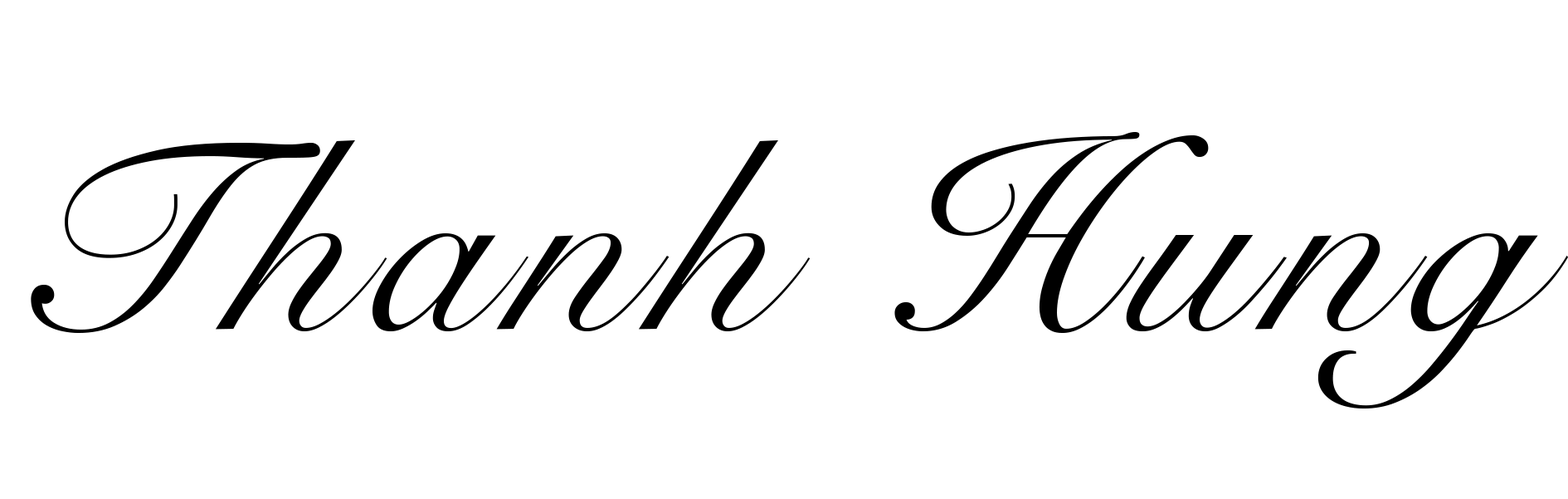
<style>
.page{position:relative;width:1568px;height:499px;background:#ffffff}
.page>*{position:absolute;margin:0}
.t1{font:271.8px "SnellRoundhand";letter-spacing:0.075em;color:#000000}
</style>
<div class="page">
<p class="t1" style="left:31px;top:132px;width:1537px;height:276px">Thanh Hung</p>
</div>
